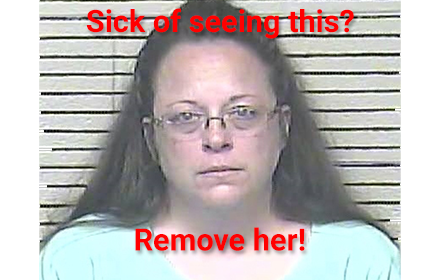
<style>
.page{position:relative;width:440px;height:280px}
.page>*{position:absolute;margin:0}
.t1{font:30.7px "Roboto-Bold";color:#ff0000}
</style>
<div class="page">
<p class="t1" style="left:86px;top:8px;width:268px;height:31px">Sick of seeing this?</p>
<p class="t1" style="left:135px;top:227px;width:170px;height:24px">Remove her!</p>
</div>
